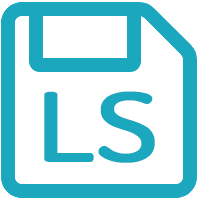
<style>
.page{position:relative;width:200px;height:200px;background:#ffffff}
.page>*{position:absolute;margin:0}
.t1{font:96px "Dosis-SemiBold";color:#1ba8be;scale:1.3 1}
</style>
<div class="page">
<p class="t1" style="left:44px;top:91px;width:111px;height:72px">LS</p>
</div>
